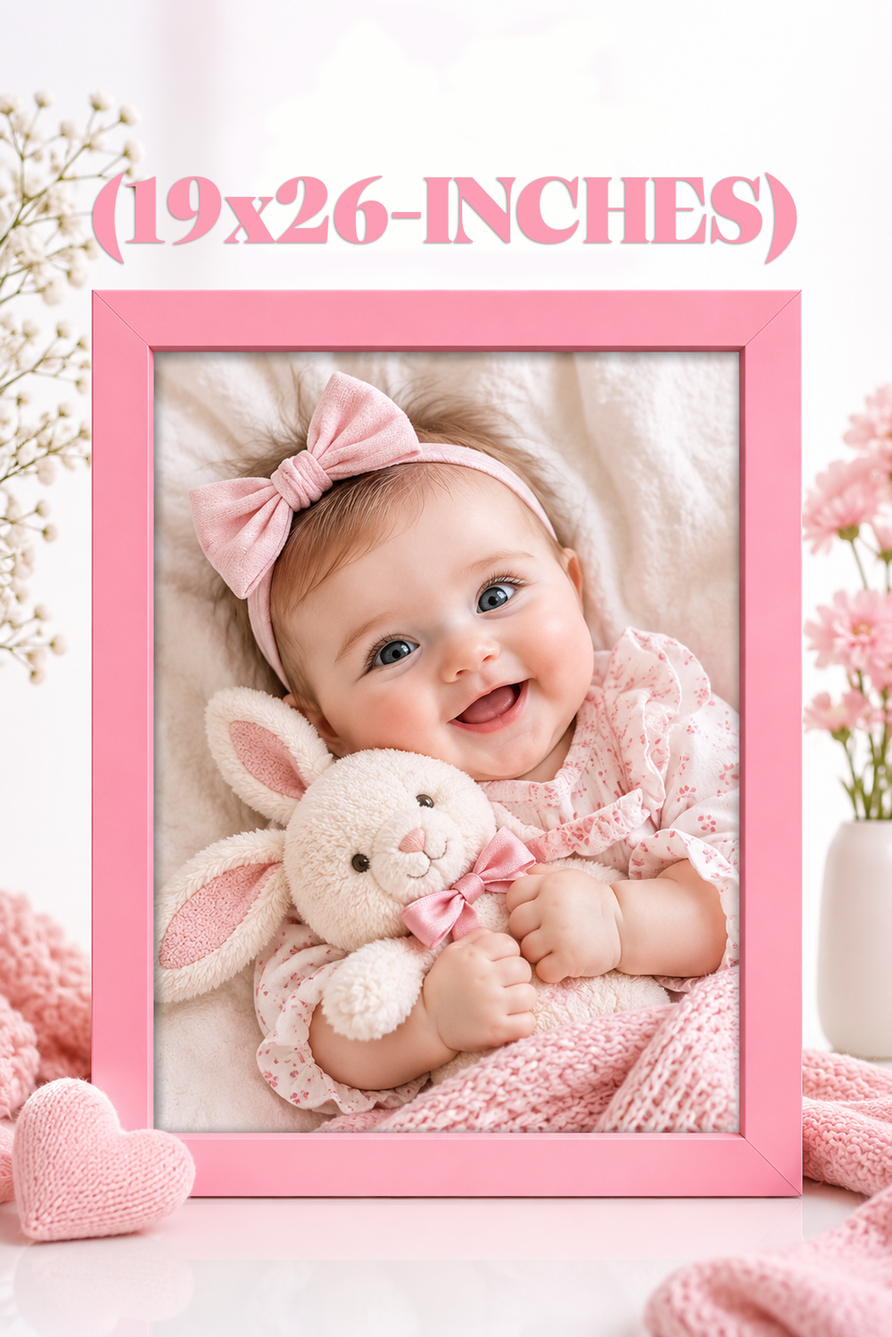
<style>
.page{position:relative;width:892px;height:1337px}
.page>*{position:absolute;margin:0}
.t1{font:95.6px "CotfordDisplay-XBold";color:#fc9db3}
</style>
<div class="page">
<p class="t1" style="left:93px;top:172px;width:704px;height:92px">(19x26-INCHES)</p>
</div>
